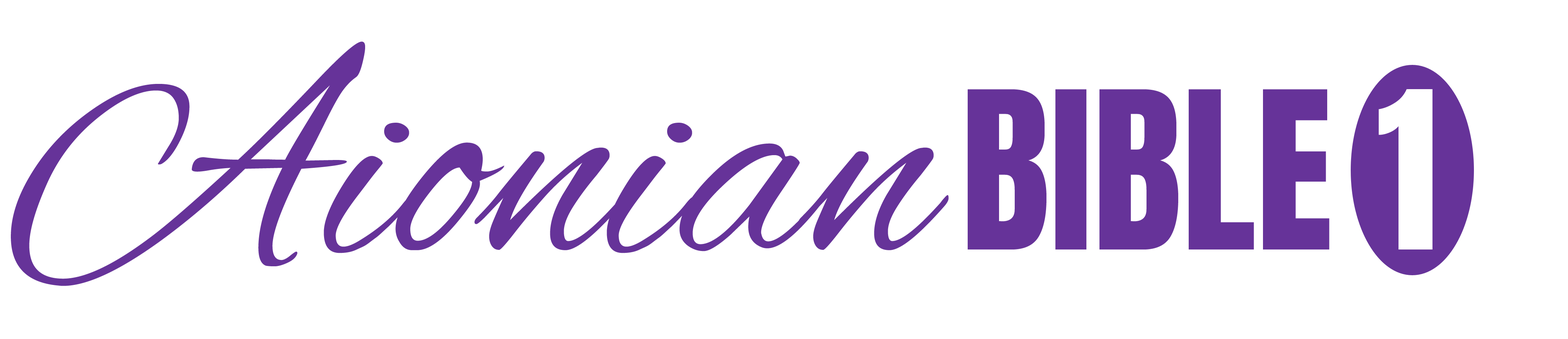
<style>
.page{position:relative;width:1568px;height:339px;background:#ffffff}
.page>*{position:absolute;margin:0}
.t1{font:311.1px "AlexBrush-Regular";color:#663399}
.t2{font:186.7px "Anton-Regular";color:#663399}
.t3{font:186.7px "Anton-Regular";color:#ffffff}
</style>
<div class="page">
<p class="t1" style="left:11px;top:41px;width:938px;height:245px">Aionian</p>
<p class="t2" style="left:968px;top:89px;width:464px;height:161px">BIBLE <span class="t3">1</span></p>
</div>
